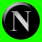
<style>
.page{position:relative;width:42px;height:42px;background:#000000}
.page>*{position:absolute;margin:0}
.t1{font:30px "TimesNewRomanPS-BoldMT";color:#cbcbcb}
</style>
<div class="page">
<p class="t1" style="left:10px;top:11px;width:22px;height:21px">N</p>
</div>
